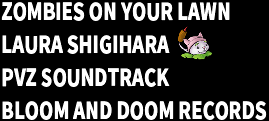
<style>
.page{position:relative;width:269px;height:121px;background:#000000}
.page>*{position:absolute;margin:0}
.t1{font:23.2px/32.8px "NotoSansSC-Black";color:#ffffff;text-transform:uppercase;scale:0.78 1}
</style>
<div class="page">
<p class="t1" style="left:1px;top:2px;width:266px;height:118px">ZOMBIES ON YOUR LAWN<br>LAURA SHIGIHARA<br>PVZ SOUNDTRACK<br>BLOOM AND DOOM RECORDS</p>
</div>
